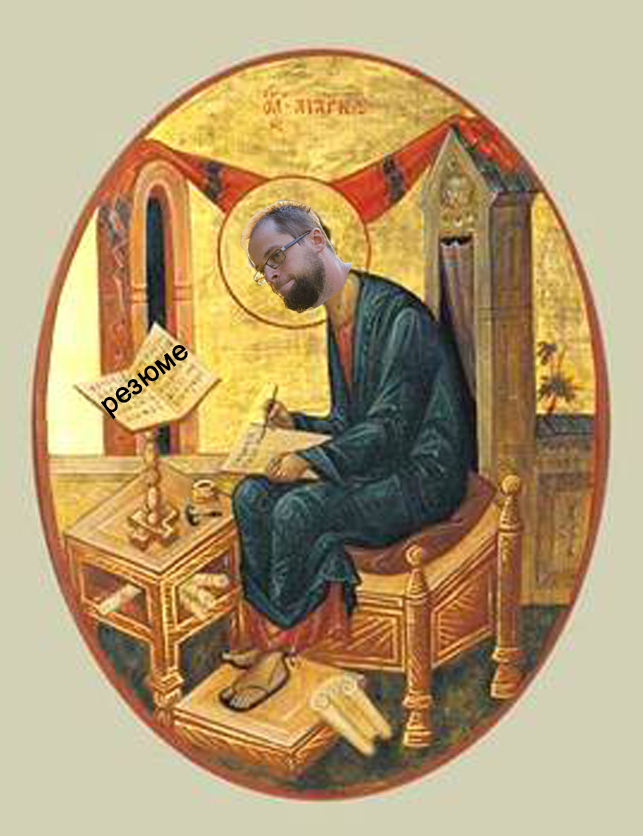
<style>
.page{position:relative;width:643px;height:836px;background:#d2d1b5}
.page>*{position:absolute;margin:0}
.t1{font:28px "ArialMT";color:#000000;font-weight:bold}
</style>
<div class="page">
<p class="t1" style="left:101px;top:345px;width:87px;height:74px;rotate:-37deg">резюме</p>
</div>
